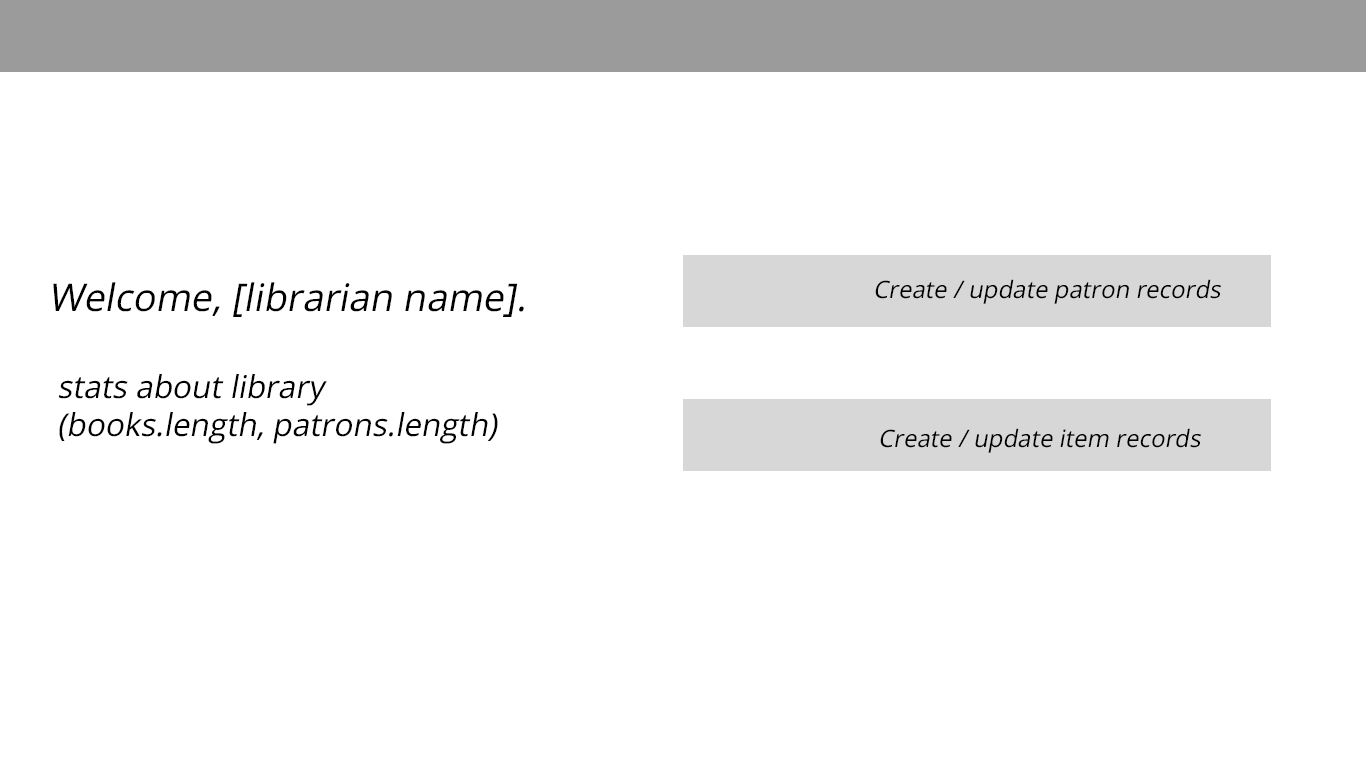
<style>
.page{position:relative;width:1366px;height:768px;background:#ffffff}
.page>*{position:absolute;margin:0}
.t1{font:24px "OpenSans-Regular";color:#000000;font-style:italic}
.t2{font:38px "OpenSans-Regular";color:#000000;font-style:italic}
.t3{font:31.5px "OpenSans-Regular";color:#000000;font-style:italic}
</style>
<div class="page">
<p class="t1" style="left:875px;top:279px;width:347px;height:25px">Create / update patron records</p>
<p class="t2" style="left:53px;top:282px;width:471px;height:35px">Welcome, [librarian name].</p>
<p class="t3" style="left:58px;top:374px;width:440px;height:70px">stats about library<br>(books.length, patrons.length)</p>
<p class="t1" style="left:880px;top:428px;width:322px;height:25px">Create / update item records</p>
</div>
